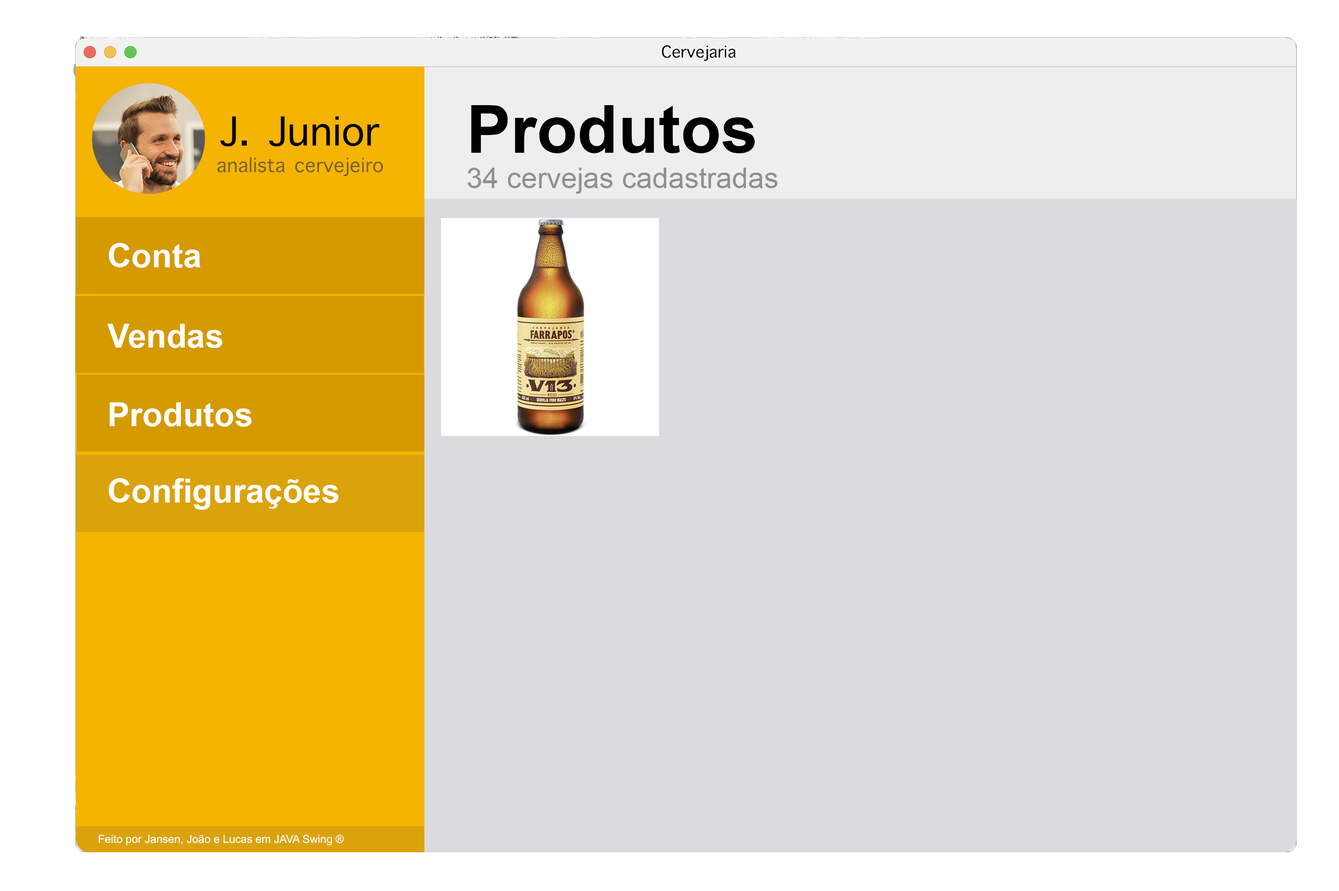
<style>
.page{position:relative;width:1339px;height:891px;background:#dbdadc}
.page>*{position:absolute;margin:0}
.t1{font:22.1px "AppleSymbols";color:#000000}
.t2{font:66.4px "Arial-BoldMT";color:#000000}
.t3{font:54.3px "AppleSymbols";color:#000000}
.t4{font:26.6px "AppleSymbols";color:#75622f}
.t5{font:28.8px "ArialMT";color:#8f8f8f}
.t6{font:33.2px "Arial-BoldMT";color:#ffffff}
.t7{font:11.1px "ArialMT";color:#ffffff}
</style>
<div class="page">
<p class="t1" style="left:662px;top:45px;width:74px;height:16px">Cervejaria</p>
<p class="t2" style="left:471px;top:105px;width:284px;height:48px">Produtos</p>
<p class="t3" style="left:220px;top:116px;width:160px;height:31px">J. Junior</p>
<p class="t4" style="left:217px;top:157px;width:166px;height:19px">analista cervejeiro</p>
<p class="t5" style="left:467px;top:168px;width:310px;height:26px">34 cervejas cadastradas</p>
<p class="t6" style="left:108px;top:243px;width:93px;height:25px">Conta</p>
<p class="t6" style="left:107px;top:324px;width:115px;height:24px">Vendas</p>
<p class="t6" style="left:110px;top:402px;width:142px;height:25px">Produtos</p>
<p class="t6" style="left:108px;top:478px;width:231px;height:32px">Configurações</p>
<p class="t7" style="left:98px;top:834px;width:246px;height:11px">Feito por Jansen, João e Lucas em JAVA Swing ®</p>
</div>
